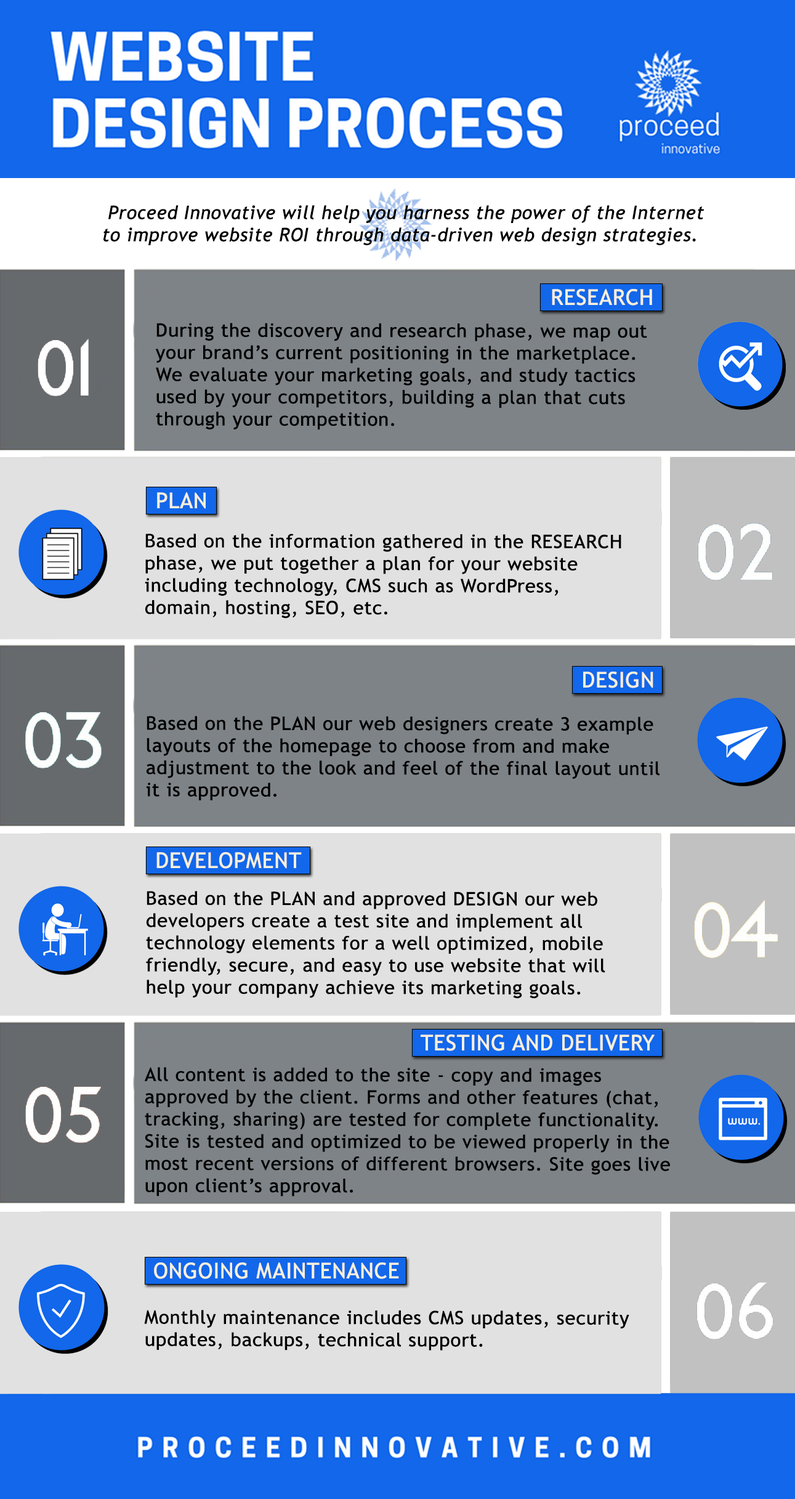
<style>
.page{position:relative;width:795px;height:1499px;background:#7e8387}
.page>*{position:absolute;margin:0}
.t1{font:18.5px "TrebuchetMS-Italic";letter-spacing:0.002em;color:#000000;font-weight:bold}
.t2{font:21.6px "TrebuchetMS";letter-spacing:0.002em;color:#f9efdb;font-weight:bold}
.t3{font:18.5px "TrebuchetMS";letter-spacing:0.002em;color:#000000;font-weight:bold;scale:1.04 1}
</style>
<div class="page">
<p class="t1" style="left:104px;top:205px;width:601px;height:40px">Proceed Innovative will help you harness the power of the Internet to improve website ROI through data-driven web design strategies.</p>
<p class="t2" style="left:552px;top:289px;width:100px;height:17px">RESEARCH</p>
<p class="t3" style="left:155px;top:323px;width:493px;height:107px">During the discovery and research phase, we map out your brand’s current positioning in the marketplace. We evaluate your marketing goals, and study tactics used by your competitors, building a plan that cuts through your competition.</p>
<p class="t2" style="left:157px;top:492px;width:49px;height:17px">PLAN</p>
<p class="t3" style="left:145px;top:534px;width:477px;height:85px">Based on the information gathered in the RESEARCH phase, we put together a plan for your website including technology, CMS such as WordPress, domain, hosting, SEO, etc.</p>
<p class="t2" style="left:583px;top:672px;width:71px;height:16px">DESIGN</p>
<p class="t3" style="left:146px;top:716px;width:514px;height:84px">Based on the PLAN our web designers create 3 example layouts of the homepage to choose from and make adjustment to the look and feel of the final layout until it is approved.</p>
<p class="t2" style="left:157px;top:852px;width:145px;height:17px">DEVELOPMENT</p>
<p class="t3" style="left:146px;top:891px;width:460px;height:108px">Based on the PLAN and approved DESIGN our web developers create a test site and implement all technology elements for a well optimized, mobile friendly, secure, and easy to use website that will help your company achieve its marketing goals.</p>
<p class="t2" style="left:421px;top:1035px;width:234px;height:16px">TESTING AND DELIVERY</p>
<p class="t3" style="left:144px;top:1067px;width:526px;height:130px">All content is added to the site - copy and images approved by the client. Forms and other features (chat, tracking, sharing) are tested for complete functionality. Site is tested and optimized to be viewed properly in the most recent versions of different browsers. Site goes live upon client’s approval.</p>
<p class="t2" style="left:154px;top:1262px;width:245px;height:17px">ONGOING MAINTENANCE</p>
<p class="t3" style="left:144px;top:1310px;width:486px;height:41px">Monthly maintenance includes CMS updates, security updates, backups, technical support.</p>
</div>
